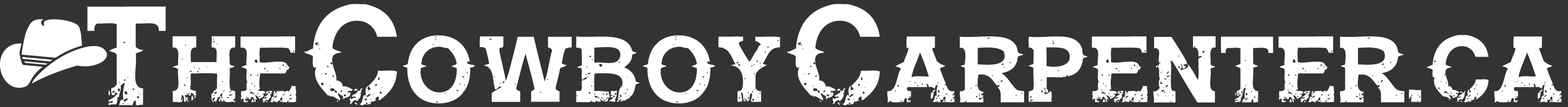
<style>
.page{position:relative;width:1568px;height:107px;background:#333333}
.page>*{position:absolute;margin:0}
.t1{font:78px "GunfighterAcademy-Regular";color:#ffffff}
.t2{font:116.9px "GunfighterAcademy-Regular";color:#ffffff}
</style>
<div class="page">
<p class="t1" style="left:87px;top:4px;width:1475px;height:102px"><span class="t2">T</span>he<span class="t2">C</span>owboy<span class="t2">C</span>arpenter.ca</p>
</div>
